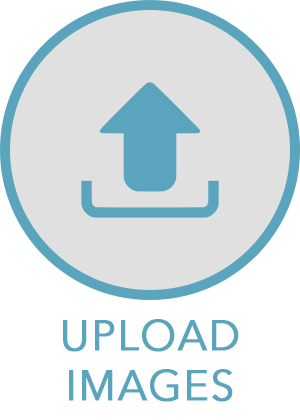
<style>
.page{position:relative;width:300px;height:420px;background:#e0e0e0}
.page>*{position:absolute;margin:0}
.t1{font:42px "AvenirNextLTPro-Regular";letter-spacing:0.025em;color:#5aa5bd;font-variant:small-caps;font-weight:bold}
</style>
<div class="page">
<p class="t1" style="left:63px;top:319px;width:176px;height:83px;text-align:center">UPLOAD<br>IMAGES</p>
</div>
